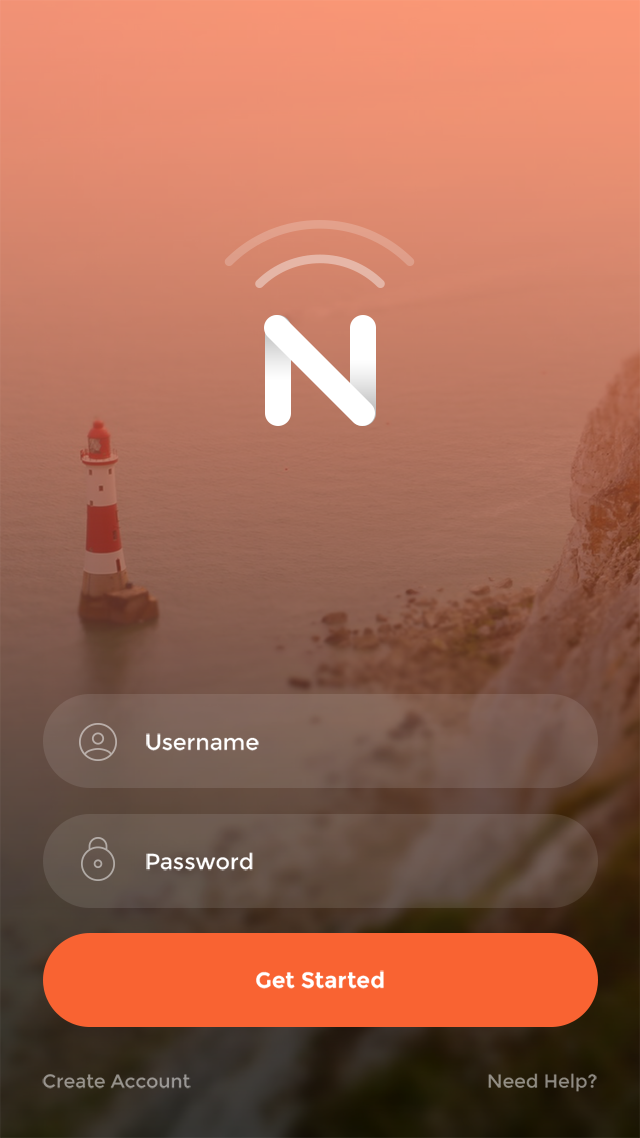
<style>
.page{position:relative;width:640px;height:1138px}
.page>*{position:absolute;margin:0}
.t1{font:22.2px "Montserrat-Regular";color:#ffffff}
.t2{font:22.2px "Montserrat-Bold";color:#ffffff}
.t3{font:18.8px "Montserrat-Regular";color:#908c83}
.t4{font:18.8px "Montserrat-Regular";color:#99958e}
</style>
<div class="page">
<p class="t1" style="left:146px;top:733px;width:113px;height:18px">Username</p>
<p class="t1" style="left:146px;top:852px;width:107px;height:19px">Password</p>
<p class="t2" style="left:256px;top:970px;width:128px;height:19px">Get Started</p>
<p class="t3" style="left:488px;top:1073px;width:109px;height:19px">Need Help?</p>
<p class="t4" style="left:42px;top:1074px;width:149px;height:15px">Create Account</p>
</div>
